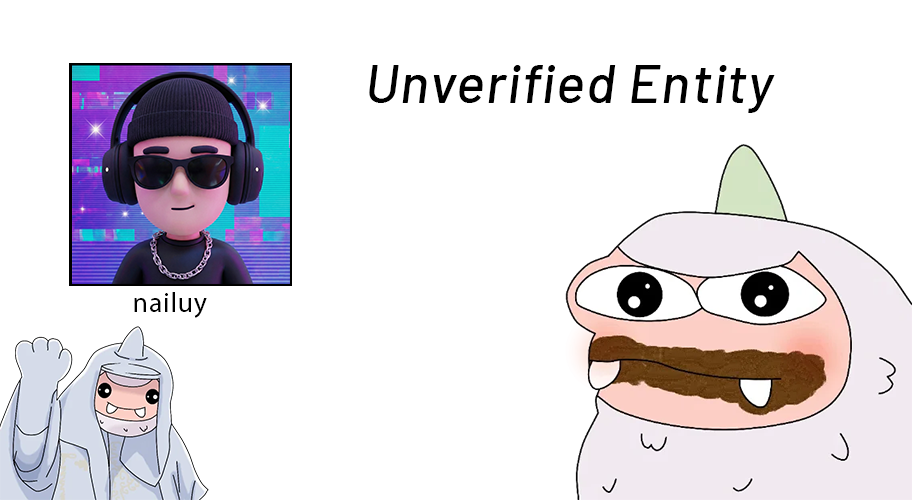
<style>
.page{position:relative;width:912px;height:500px;background:#ffffff}
.page>*{position:absolute;margin:0}
.t1{font:54.6px "Barlow-MediumItalic";letter-spacing:0.025em;color:#000000}
.t2{font:28px "MyriadPro-Regular";letter-spacing:0.025em;color:#000000}
</style>
<div class="page">
<p class="t1" style="left:369px;top:65px;width:406px;height:48px">Unverified Entity</p>
<p class="t2" style="left:134px;top:292px;width:73px;height:26px">nailuy</p>
</div>
